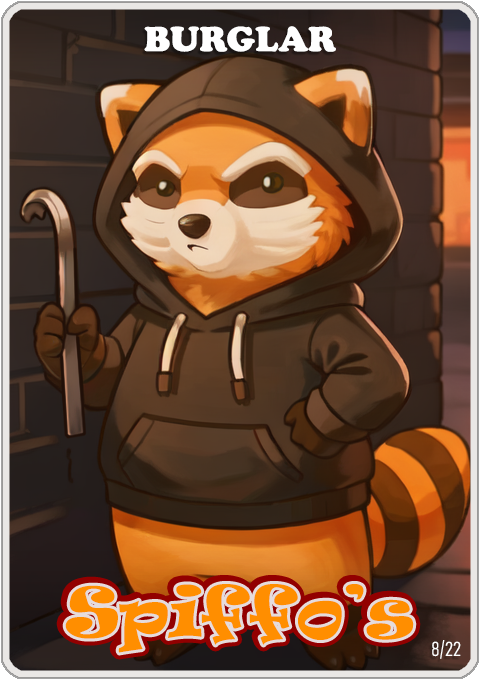
<style>
.page{position:relative;width:480px;height:680px}
.page>*{position:absolute;margin:0}
.t1{font:36px "CooperBlack";color:#ffffff}
.t2{font:65px "Ravie";color:#ff8e00}
.t3{font:20px "Bahnschrift-LightCondensed";color:#ffffff}
</style>
<div class="page">
<p class="t1" style="left:144px;top:26px;width:192px;height:26px">BURGLAR</p>
<p class="t2" style="left:65px;top:584px;width:349px;height:69px">Spiffo’s</p>
<p class="t3" style="left:432px;top:640px;width:29px;height:19px">8/22</p>
</div>
